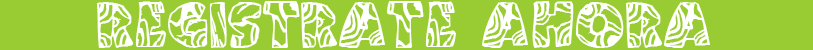
<style>
.page{position:relative;width:813px;height:50px;background:#99cb33}
.page>*{position:absolute;margin:0}
.t1{font:48px "SwirledBRK";color:#ffffff}
.t2{font:36px "SwirledBRK";color:#ffffff}
</style>
<div class="page">
<p class="t1" style="left:96px;top:1px;width:614px;height:47px"><span class="t2">¡¡</span>REGISTRATE AHORA!!!!¡</p>
</div>
